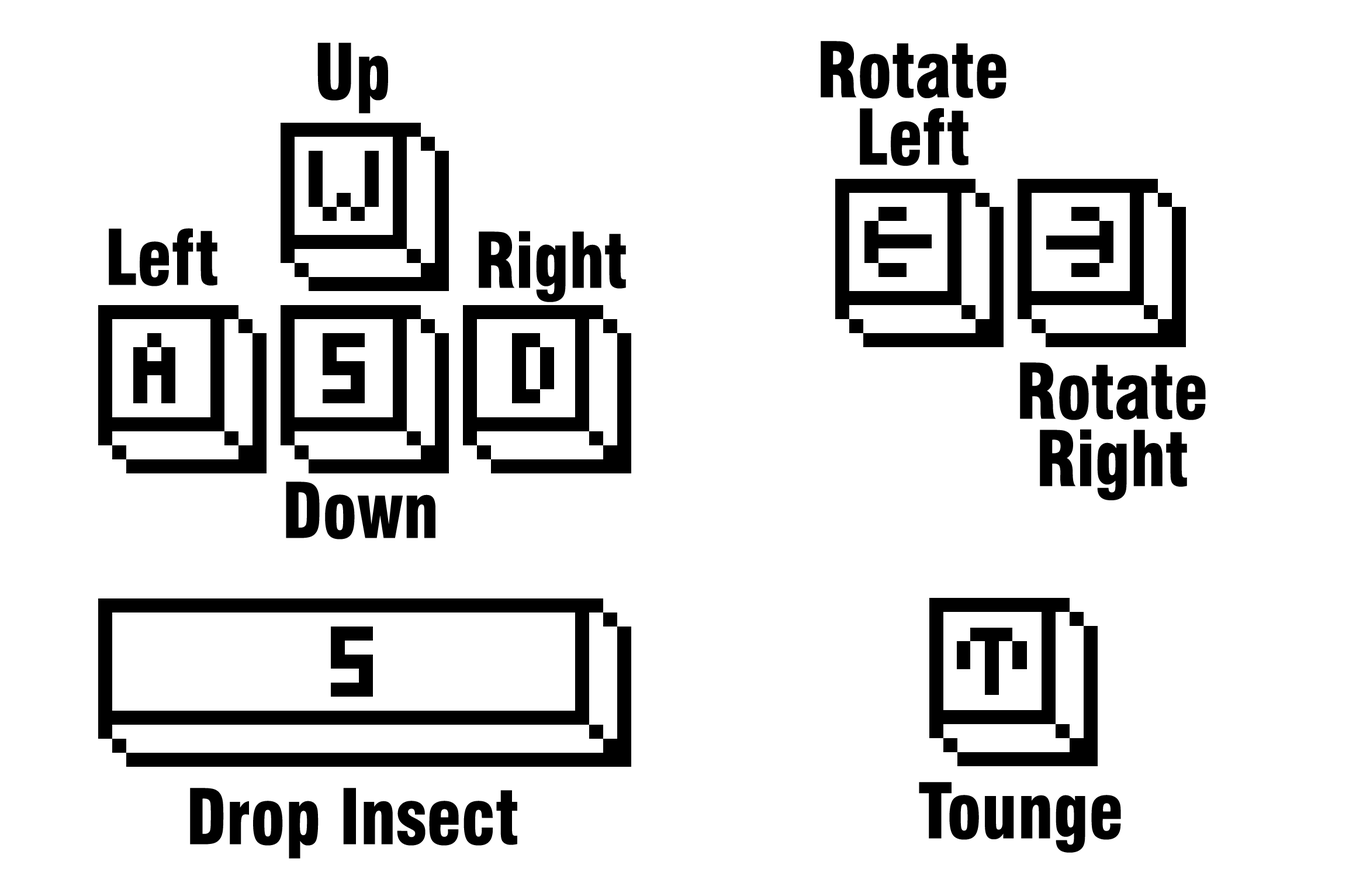
<style>
.page{position:relative;width:1356px;height:879px;background:#ffffff}
.page>*{position:absolute;margin:0}
.t1{font:74.6px "Swiss721BT-BlackCondensed";color:#000000;scale:0.93 1}
</style>
<div class="page">
<p class="t1" style="left:821px;top:41px;width:186px;height:125px;text-align:center">Rotate<br>Left</p>
<p class="t1" style="left:317px;top:43px;width:71px;height:70px">Up</p>
<p class="t1" style="left:109px;top:228px;width:108px;height:58px">Left</p>
<p class="t1" style="left:479px;top:231px;width:147px;height:71px">Right</p>
<p class="t1" style="left:1020px;top:362px;width:186px;height:138px;text-align:center">Rotate<br>Right</p>
<p class="t1" style="left:286px;top:482px;width:150px;height:58px">Down</p>
<p class="t1" style="left:919px;top:782px;width:202px;height:71px">Tounge</p>
<p class="t1" style="left:190px;top:788px;width:327px;height:71px">Drop Insect</p>
</div>
